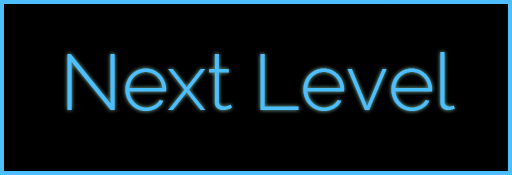
<style>
.page{position:relative;width:512px;height:175px;background:#000000}
.page>*{position:absolute;margin:0}
.t1{font:80px "Raleway-Light";color:#4dbeff}
</style>
<div class="page">
<p class="t1" style="left:67px;top:52px;width:388px;height:59px">Next Level</p>
</div>
